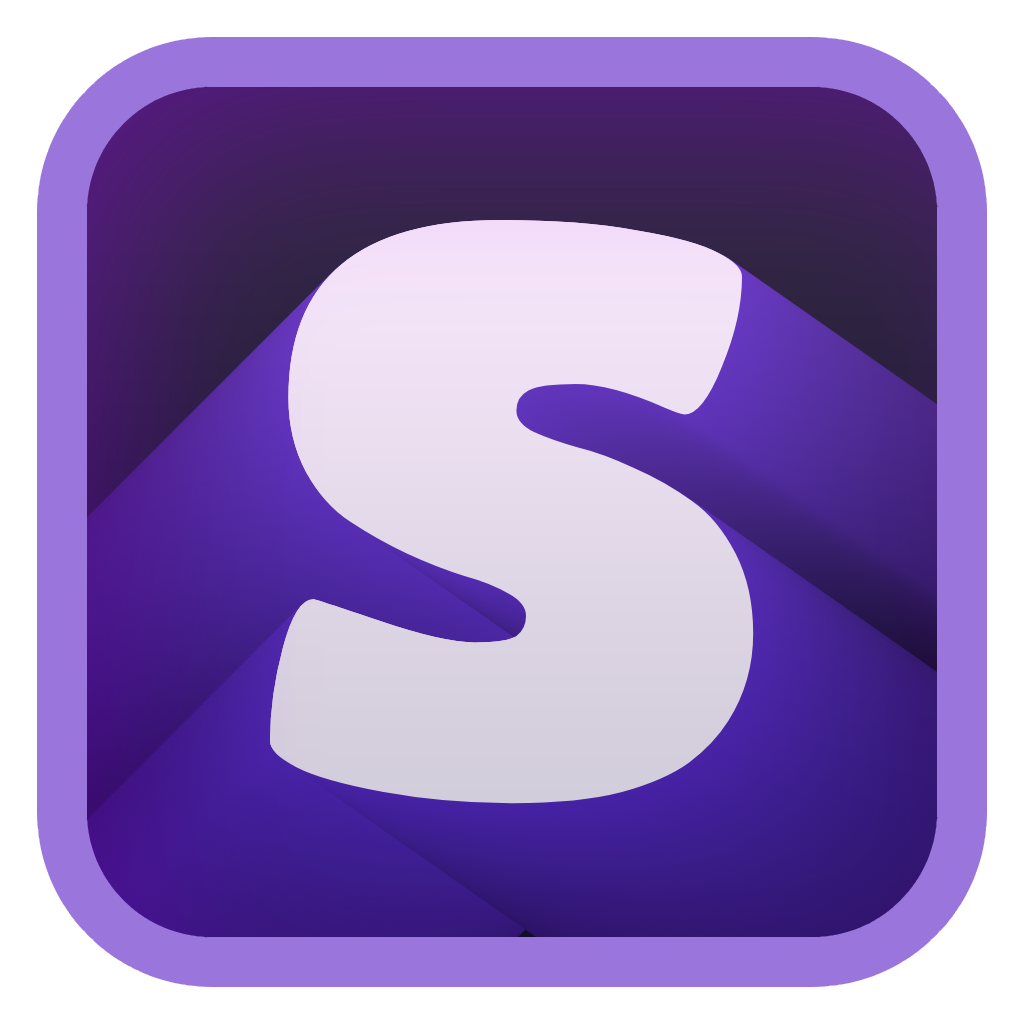
<style>
.page{position:relative;width:1024px;height:1024px}
.page>*{position:absolute;margin:0}
.t1{font:800px "TitanOne";color:#e4daea}
</style>
<div class="page">
<p class="t1" style="left:270px;top:220px;width:484px;height:584px">S</p>
<p class="t1" style="left:270px;top:220px;width:484px;height:584px">S</p>
</div>
